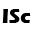
<style>
.page{position:relative;width:32px;height:32px;background:#ffffff}
.page>*{position:absolute;margin:0}
.t1{font:20.7px "ErasITC-Bold";color:#000000}
</style>
<div class="page">
<p class="t1" style="left:2px;top:9px;width:29px;height:14px">ISc</p>
</div>
